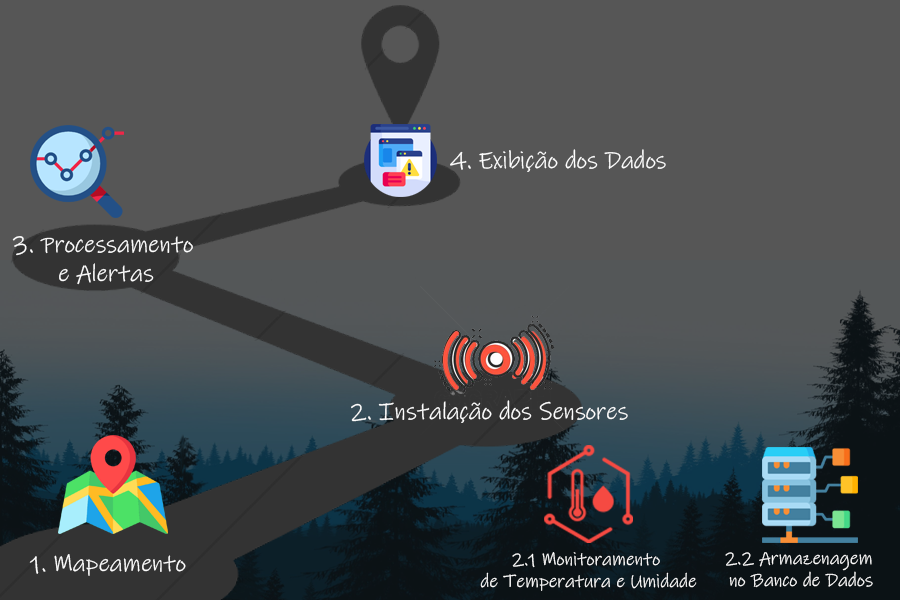
<style>
.page{position:relative;width:900px;height:600px;background:#565656}
.page>*{position:absolute;margin:0}
.t1{font:24.4px "InkFree";color:#ffffff}
.t2{font:18.7px "InkFree";color:#ffffff}
</style>
<div class="page">
<p class="t1" style="left:450px;top:149px;width:216px;height:23px">4. Exibição dos Dados</p>
<p class="t1" style="left:12px;top:236px;width:181px;height:49px;text-align:center">3. Processamento <br>e Alertas</p>
<p class="t1" style="left:351px;top:400px;width:277px;height:23px">2. Instalação dos Sensores</p>
<p class="t1" style="left:29px;top:554px;width:157px;height:22px">1. Mapeamento</p>
<p class="t2" style="left:480px;top:552px;width:217px;height:39px;text-align:center">2.1 Monitoramento <br>de Temperatura e Umidade</p>
<p class="t2" style="left:725px;top:552px;width:148px;height:36px;text-align:center">2.2 Armazenagem <br>no Banco de Dados</p>
</div>
